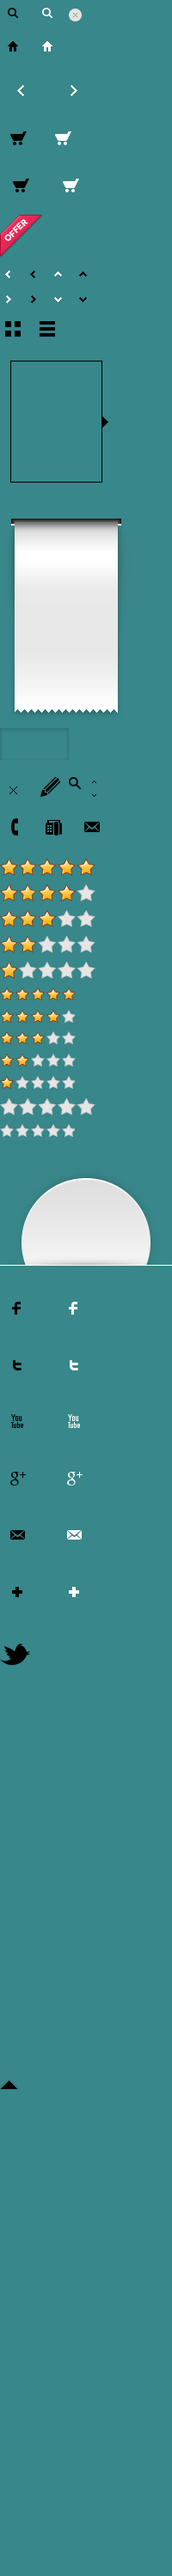
<style>
.page{position:relative;width:172px;height:2576px;background:#38878a}
.page>*{position:absolute;margin:0}
.t1{font:8.6px "Novecentowide-DemiBold";color:#ffffff}
</style>
<div class="page">
<p class="t1" style="left:4px;top:219px;width:24px;height:22px;rotate:-45deg">offer</p>
</div>
